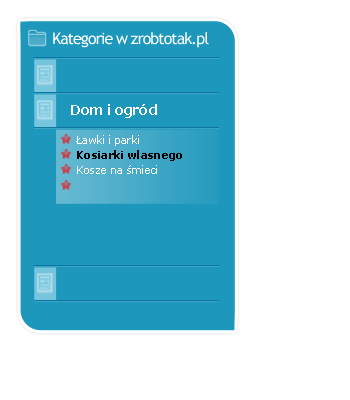
<style>
.page{position:relative;width:350px;height:400px;background:#ffffff}
.page>*{position:absolute;margin:0}
.t1{font:16px "TrebuchetMS";letter-spacing:-0.06em;color:#ffffff}
.t2{font:14px "Verdana-Bold";letter-spacing:-0.06em;color:#ffffff}
.t3{font:11px "Verdana";letter-spacing:-0.06em;color:#ffffff}
.t4{font:11px "Verdana-Bold";letter-spacing:-0.06em;color:#000000}
</style>
<div class="page">
<p class="t1" style="left:53px;top:32px;width:156px;height:16px">Kategorie w zrobtotak.pl</p>
<p class="t2" style="left:71px;top:104px;width:86px;height:14px">Dom i ogród</p>
<p class="t3" style="left:76px;top:135px;width:63px;height:11px">Ławki i parki</p>
<p class="t4" style="left:77px;top:150px;width:105px;height:11px">Kosiarki wlasnego</p>
<p class="t3" style="left:77px;top:165px;width:80px;height:9px">Kosze na śmieci</p>
</div>
